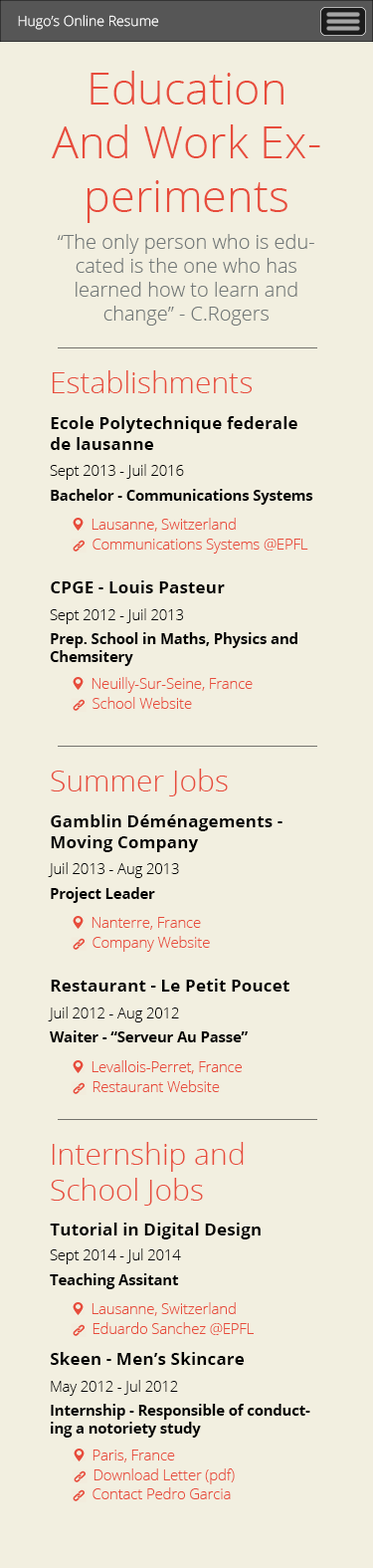
<style>
.page{position:relative;width:373px;height:1568px;background:#f2efe0}
.page>*{position:absolute;margin:0}
.t1{font:14px "OpenSans-Light";color:#ffffff}
.t2{font:44.8px "OpenSans-Light";color:#e74c3c}
.t3{font:19.9px "OpenSans-Light";color:#727878}
.t4{font:29.9px "OpenSans-Light";color:#e74c3c}
.t5{font:17.2px "OpenSans-Bold";color:#000000}
.t6{font:14.5px "OpenSans-Light";color:#000000}
.t7{font:14.5px "OpenSans-Bold";color:#000000}
.t8{font:14.5px "OpenSans-Light";color:#e74c3c}
</style>
<div class="page">
<p class="t1" style="left:18px;top:15px;width:141px;height:15px">Hugo’s Online Resume</p>
<p class="t2" style="left:52px;top:71px;width:269px;height:152px;text-align:center">Education And Work Experiments</p>
<p class="t3" style="left:57px;top:234px;width:258px;height:92px;text-align:center">“The only person who is educated is the one who has learned how to learn and change” - C.Rogers</p>
<p class="t4" style="left:52px;top:370px;width:201px;height:23px">Establishments</p>
<p class="t5" style="left:51px;top:416px;width:247px;height:34px">Ecole Polytechnique federale de lausanne</p>
<p class="t6" style="left:50px;top:464px;width:134px;height:16px">Sept 2013 - Juil 2016</p>
<p class="t7" style="left:51px;top:489px;width:263px;height:16px">Bachelor - Communications Systems</p>
<p class="t8" style="left:92px;top:518px;width:144px;height:14px">Lausanne, Switzerland</p>
<p class="t8" style="left:93px;top:539px;width:216px;height:15px">Communications Systems @EPFL</p>
<p class="t5" style="left:51px;top:580px;width:174px;height:13px">CPGE - Louis Pasteur</p>
<p class="t6" style="left:50px;top:608px;width:134px;height:16px">Sept 2012 - Juil 2013</p>
<p class="t7" style="left:50px;top:632px;width:248px;height:34px">Prep. School in Maths, Physics and Chemsitery</p>
<p class="t8" style="left:92px;top:677px;width:161px;height:16px">Neuilly-Sur-Seine, France</p>
<p class="t8" style="left:93px;top:697px;width:99px;height:12px">School Website</p>
<p class="t4" style="left:51px;top:769px;width:177px;height:27px">Summer Jobs</p>
<p class="t5" style="left:51px;top:814px;width:232px;height:38px">Gamblin Déménagements - Moving Company</p>
<p class="t6" style="left:48px;top:862px;width:131px;height:16px">Juil 2013 - Aug 2013</p>
<p class="t7" style="left:51px;top:887px;width:104px;height:16px">Project Leader</p>
<p class="t8" style="left:92px;top:917px;width:109px;height:13px">Nanterre, France</p>
<p class="t8" style="left:93px;top:936px;width:117px;height:16px">Company Website</p>
<p class="t5" style="left:51px;top:979px;width:239px;height:13px">Restaurant - Le Petit Poucet</p>
<p class="t6" style="left:48px;top:1007px;width:131px;height:15px">Juil 2012 - Aug 2012</p>
<p class="t7" style="left:50px;top:1030px;width:198px;height:12px">Waiter - “Serveur Au Passe”</p>
<p class="t8" style="left:92px;top:1060px;width:150px;height:14px">Levallois-Perret, France</p>
<p class="t8" style="left:93px;top:1080px;width:127px;height:12px">Restaurant Website</p>
<p class="t4" style="left:51px;top:1142px;width:193px;height:64px">Internship and School Jobs</p>
<p class="t5" style="left:50px;top:1223px;width:211px;height:16px">Tutorial in Digital Design</p>
<p class="t6" style="left:50px;top:1248px;width:131px;height:16px">Sept 2014 - Jul 2014</p>
<p class="t7" style="left:50px;top:1273px;width:129px;height:16px">Teaching Assitant</p>
<p class="t8" style="left:92px;top:1302px;width:144px;height:14px">Lausanne, Switzerland</p>
<p class="t8" style="left:93px;top:1322px;width:161px;height:13px">Eduardo Sanchez @EPFL</p>
<p class="t5" style="left:51px;top:1352px;width:194px;height:13px">Skeen - Men’s Skincare</p>
<p class="t6" style="left:51px;top:1380px;width:127px;height:16px">May 2012 - Jul 2012</p>
<p class="t7" style="left:51px;top:1404px;width:260px;height:34px">Internship - Responsible of conducting a notoriety study</p>
<p class="t8" style="left:93px;top:1450px;width:82px;height:12px">Paris, France</p>
<p class="t8" style="left:94px;top:1468px;width:141px;height:16px">Download Letter (pdf)</p>
<p class="t8" style="left:93px;top:1487px;width:138px;height:12px">Contact Pedro Garcia</p>
</div>
